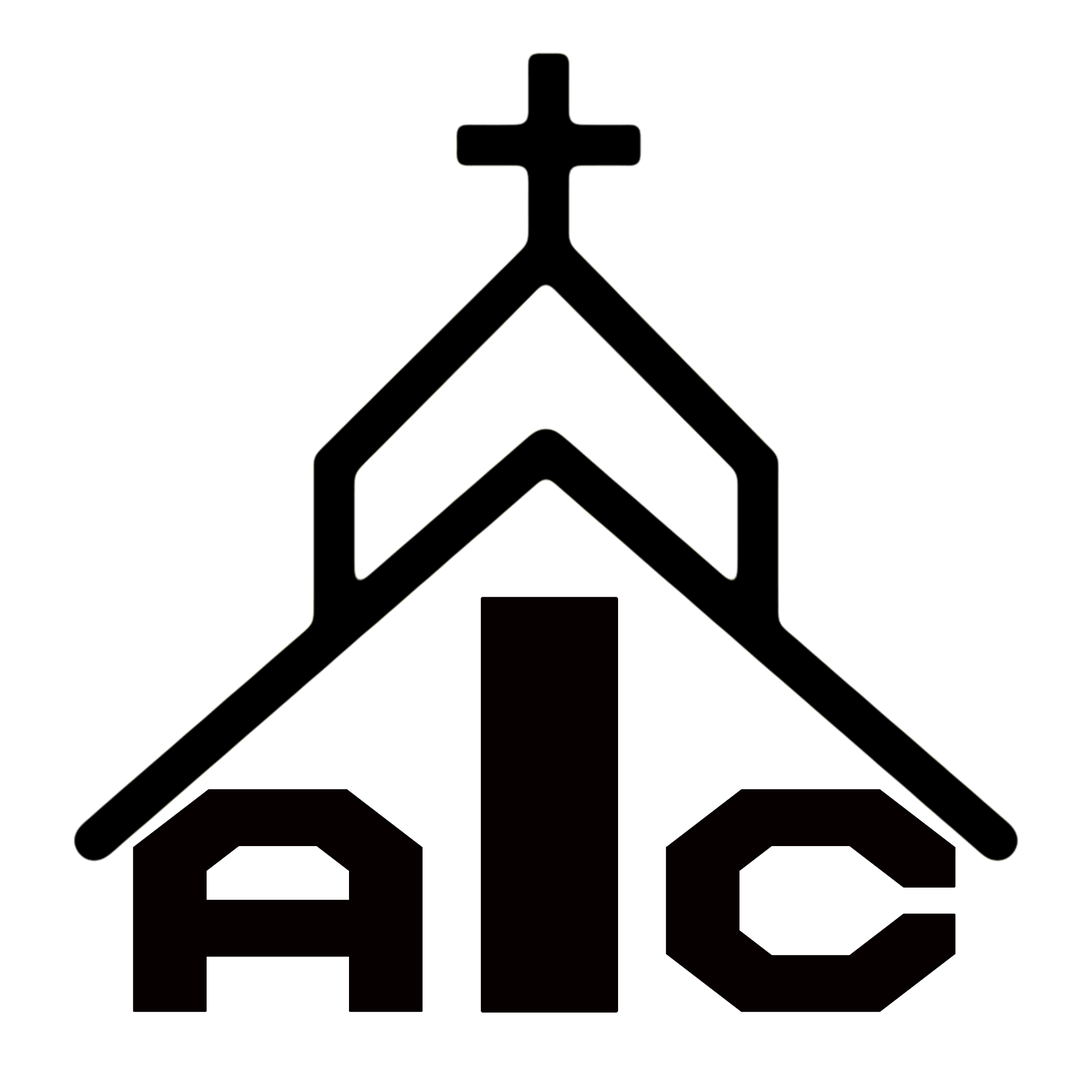
<style>
.page{position:relative;width:1092px;height:1092px;background:#ffffff}
.page>*{position:absolute;margin:0}
.t1{font:528.5px "NameSmile";color:#070000;font-weight:bold;scale:1.3 1}
.t2{font:283.1px "NameSmile";color:#070000;font-weight:bold;scale:1.3 1}
</style>
<div class="page">
<p class="t1" style="left:480px;top:597px;width:138px;height:416px">I</p>
<p class="t2" style="left:133px;top:789px;width:290px;height:223px">A</p>
<p class="t2" style="left:666px;top:789px;width:290px;height:223px">C</p>
</div>
